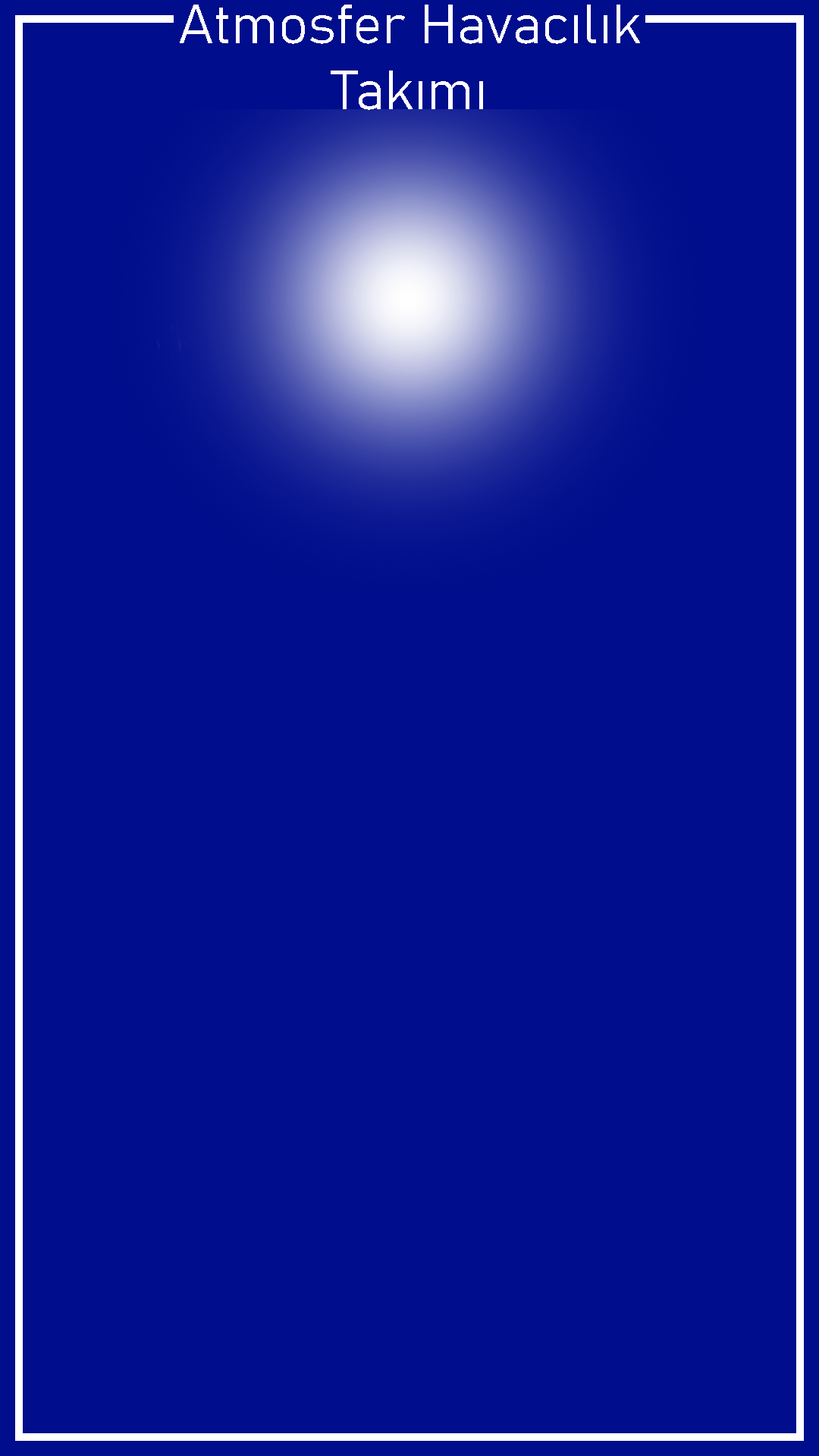
<style>
.page{position:relative;width:819px;height:1456px;background:#000d8c}
.page>*{position:absolute;margin:0}
.t1{font:54.6px "Bahnschrift";color:#ffffff}
</style>
<div class="page">
<p class="t1" style="left:180px;top:5px;width:460px;height:105px;text-align:center">Atmosfer Havacılık<br>Takımı</p>
</div>
